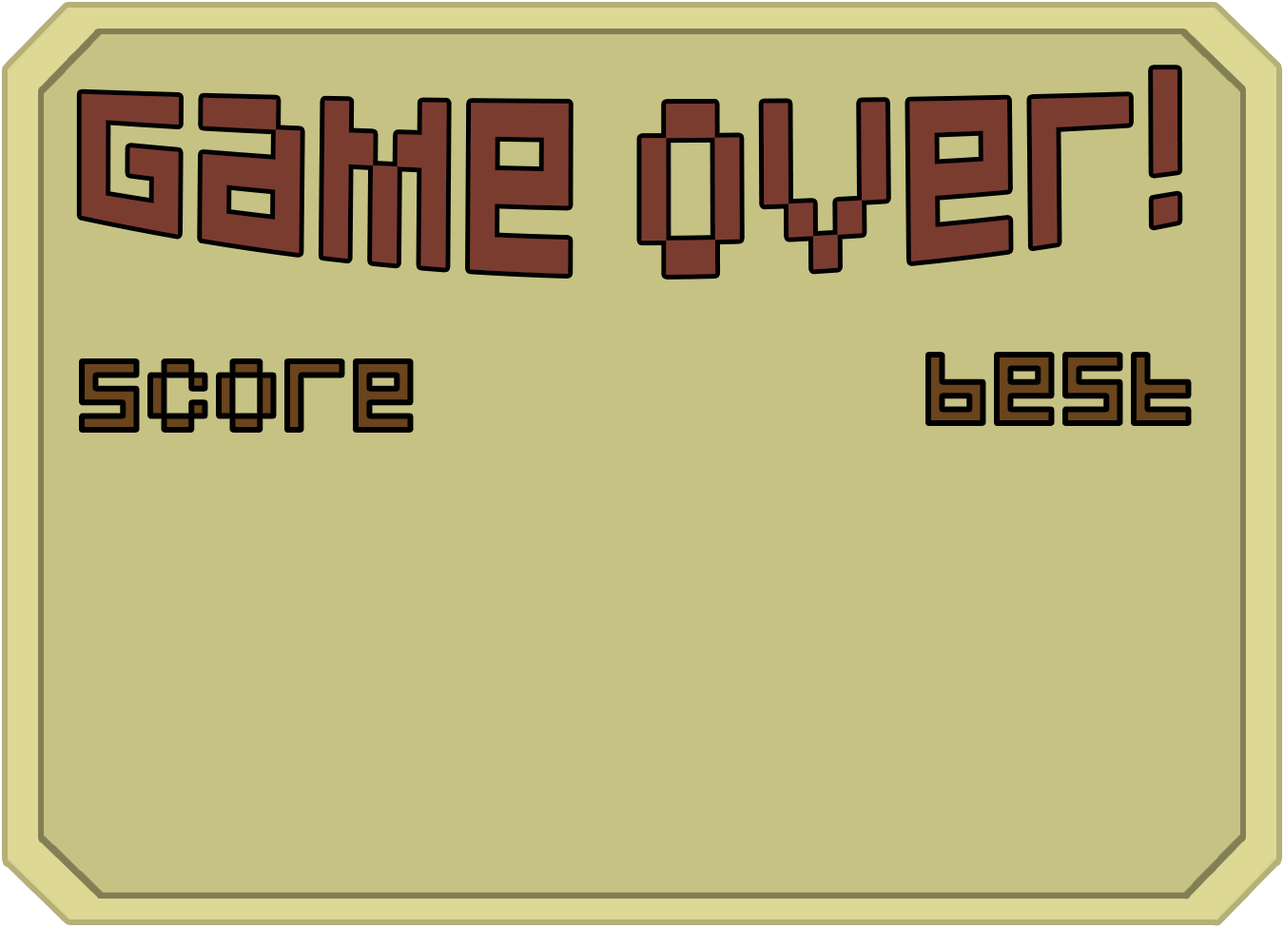
<style>
.page{position:relative;width:1284px;height:928px;background:#c6c284}
.page>*{position:absolute;margin:0}
.t1{font:121.8px "Pixeled";color:#7b3c30}
.t2{font:68.5px "Pixeled"}
</style>
<div class="page">
<p class="t1" style="left:81px;top:69px;width:1098px;height:206px">game over!</p>
<p class="t2" style="left:82px;top:362px;width:329px;height:68px">score</p>
<p class="t2" style="left:928px;top:355px;width:261px;height:68px">best</p>
</div>
